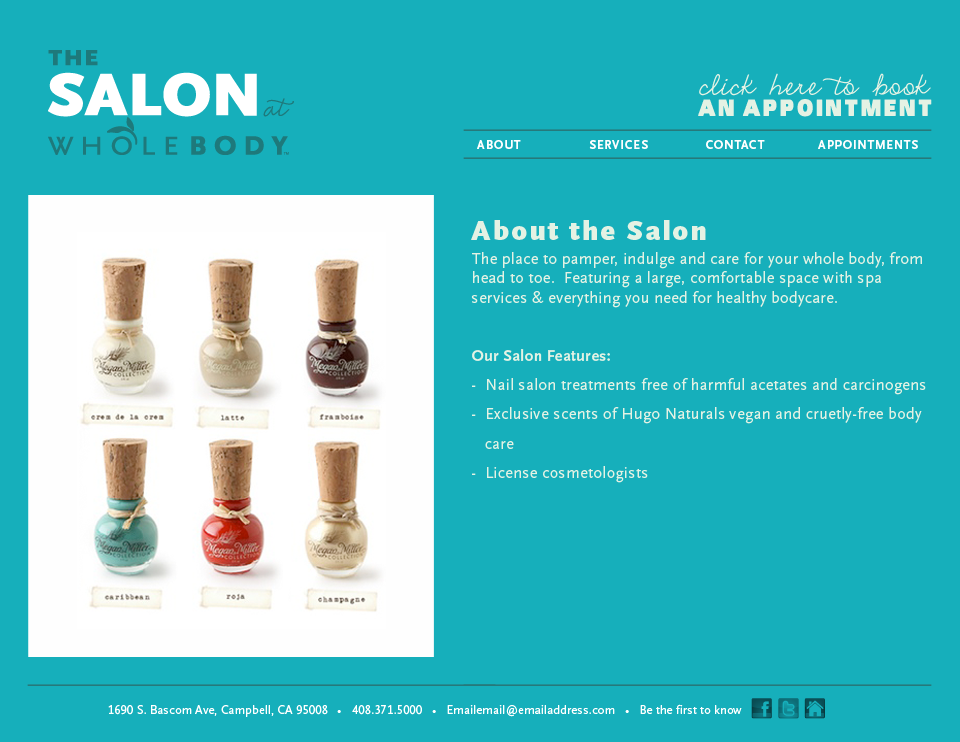
<style>
.page{position:relative;width:960px;height:742px;background:#16afbb}
.page>*{position:absolute;margin:0}
.t1{font:40.5px "EmilyLimePro";color:#e4f2e4}
.t2{font:23.1px "SansBlack";letter-spacing:0.1em;color:#e4f2e4}
.t3{font:12.5px "WFM-ScalaSans-Bold";letter-spacing:0.075em;color:#fefefe}
.t4{font:28px "ScalaSansOT-Black";letter-spacing:0.075em;color:#e4f2e4}
.t5{font:16px "WFM-ScalaSans-Regular";letter-spacing:0.025em;color:#e4f2e4}
.t6{font:16px "WFM-ScalaSans-Bold";letter-spacing:0.025em;color:#e4f2e4}
.t7{font:12.5px "WFM-ScalaSans-Regular";letter-spacing:0.01em;color:#ffffff}
</style>
<div class="page">
<p class="t1" style="left:699px;top:73px;width:232px;height:23px">click here to book</p>
<p class="t2" style="left:698px;top:99px;width:234px;height:18px">AN APPOINTMENT</p>
<p class="t3" style="left:477px;top:140px;width:44px;height:9px">ABOUT</p>
<p class="t3" style="left:589px;top:140px;width:59px;height:9px">SERVICES</p>
<p class="t3" style="left:706px;top:140px;width:59px;height:9px">CONTACT</p>
<p class="t3" style="left:818px;top:140px;width:100px;height:9px">APPOINTMENTS</p>
<p class="t4" style="left:471px;top:220px;width:235px;height:20px">About the Salon</p>
<p class="t5" style="left:471px;top:252px;width:455px;height:231px">The place to pamper, indulge and care for your whole body, from head to toe.  Featuring a large, comfortable space with spa      services &amp; everything you need for healthy bodycare. <br><span class="t6"><br>Our Salon Features:<br></span>-  Nail salon treatments free of harmful acetates and carcinogens<br>-  Exclusive scents of Hugo Naturals vegan and cruetly-free body <br>   care<br>-  License cosmetologists</p>
<p class="t7" style="left:108px;top:704px;width:634px;height:13px">1690 S. Bascom Ave, Campbell, CA 95008   •   408.371.5000   •   Emailemail@emailaddress.com   •   Be the first to know</p>
</div>
